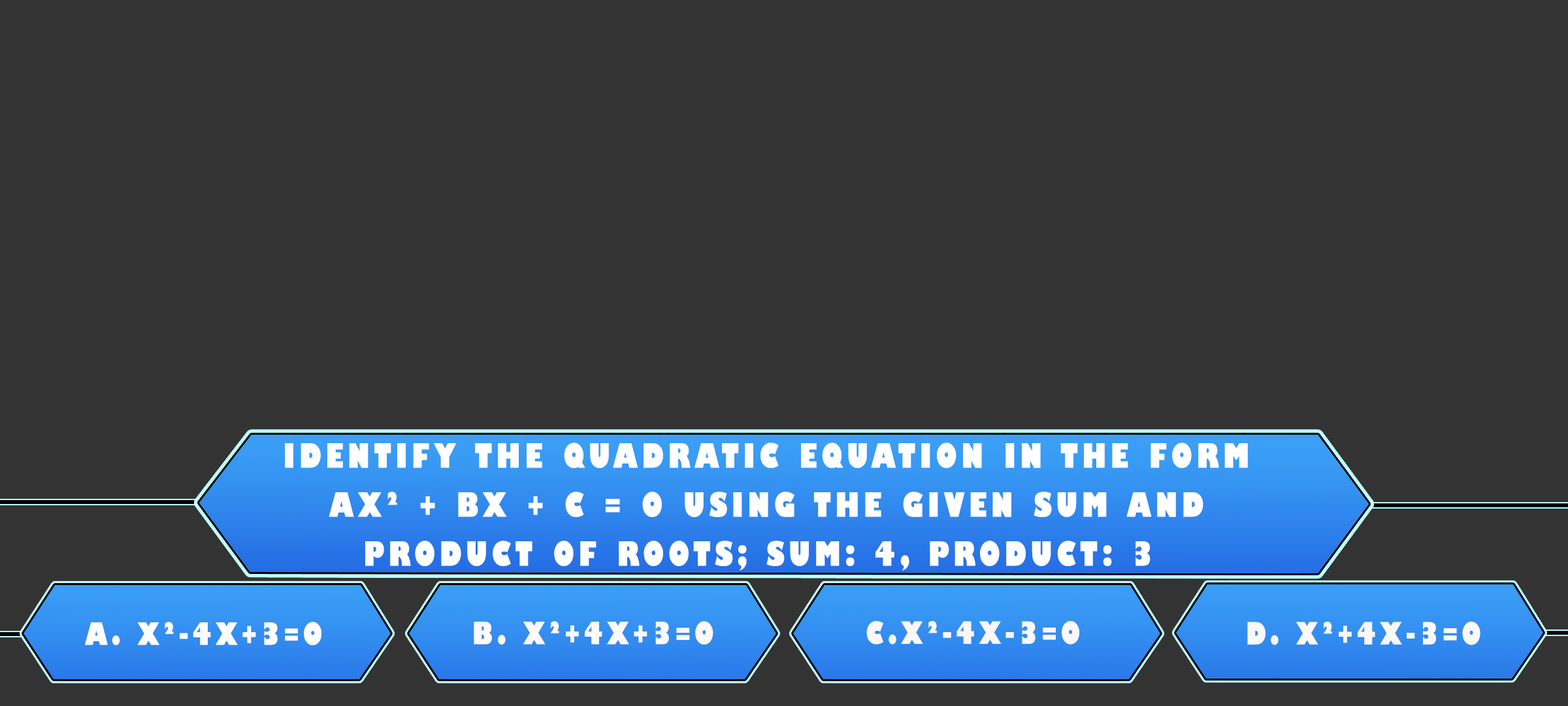
<style>
.page{position:relative;width:1568px;height:706px;background:#333333}
.page>*{position:absolute;margin:0}
.t1{font:32.7px/49px "GillSans-UltraBoldCondensed";letter-spacing:0.115em;color:#ffffff;text-transform:uppercase;scale:1.12 1}
.t2{font:29.9px "GillSans-UltraBoldCondensed";letter-spacing:0.115em;color:#fffefe;text-transform:uppercase;scale:1.12 1}
.t3{font:29.9px "GillSans-UltraBoldCondensed";letter-spacing:0.115em;color:#fdf9f9;text-transform:uppercase;scale:1.12 1}
.t4{font:29.9px "GillSans-UltraBoldCondensed";letter-spacing:0.115em;color:#fcf7f7;text-transform:uppercase;scale:1.12 1}
.t5{font:29.9px "GillSans-UltraBoldCondensed";letter-spacing:0.115em;color:#fbf8f8;text-transform:uppercase;scale:1.12 1}
</style>
<div class="page">
<p class="t1" style="left:285px;top:442px;width:963px;height:128px;text-align:center">Identify the quadratic equation in the form<br>ax² + bx + c = 0 using the given sum and<br>product of roots; sum: 4, product: 3</p>
<p class="t2" style="left:85px;top:621px;width:236px;height:24px">a. x²-4x+3=0</p>
<p class="t3" style="left:474px;top:621px;width:239px;height:23px">b. x²+4x+3=0</p>
<p class="t4" style="left:866px;top:621px;width:213px;height:23px">c.x²-4x-3=0</p>
<p class="t5" style="left:1247px;top:621px;width:233px;height:24px">d. x²+4x-3=0</p>
</div>
